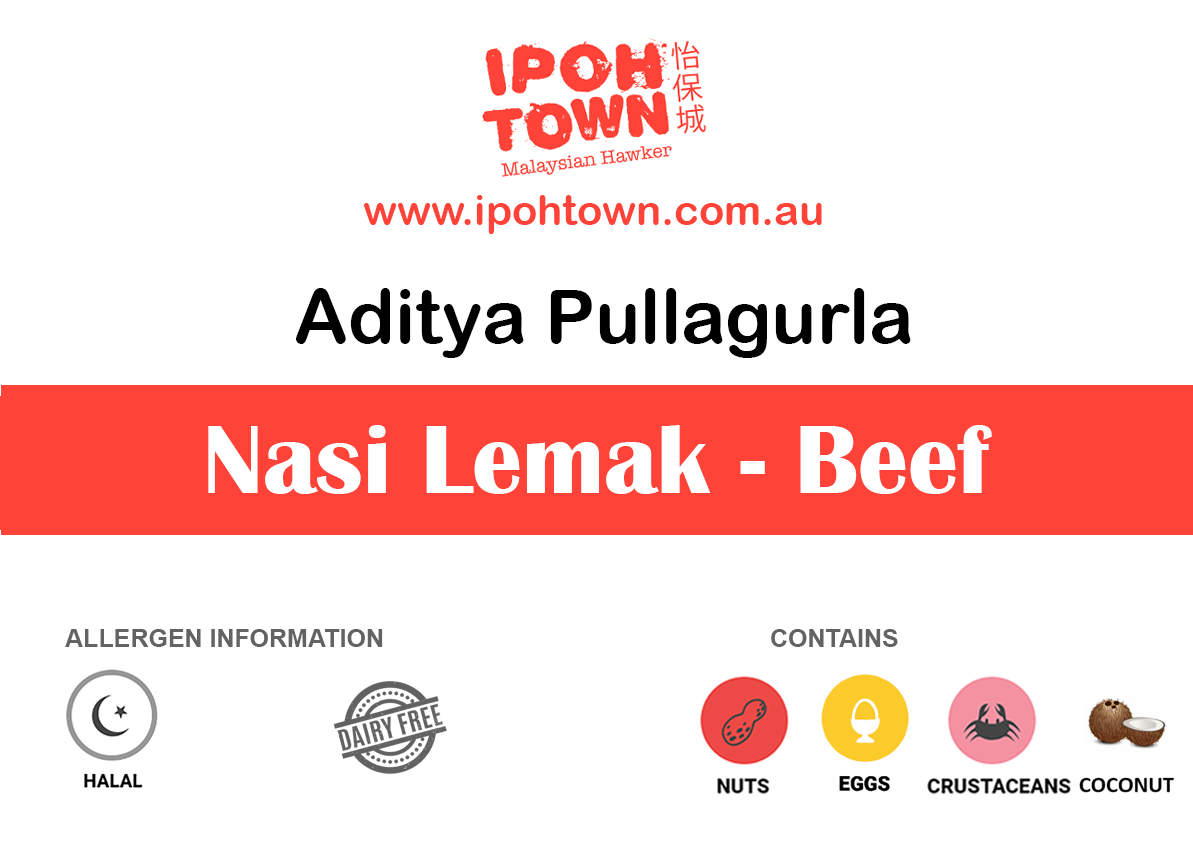
<style>
.page{position:relative;width:1193px;height:850px;background:#ffffff}
.page>*{position:absolute;margin:0}
.t1{font:41.7px "ArialRoundedMTBold";color:#ff4338}
.t2{font:75px "ArialRoundedMTBold";color:#000000}
.t3{font:100px "BritannicBold";color:#ffffff}
.t4{font:25px "Arial-BoldMT";color:#636363}
</style>
<div class="page">
<p class="t1" style="left:364px;top:195px;width:458px;height:39px">www.ipohtown.com.au</p>
<p class="t2" style="left:296px;top:288px;width:615px;height:70px">Aditya Pullagurla</p>
<p class="t3" style="left:208px;top:425px;width:784px;height:69px">Nasi Lemak - Beef</p>
<p class="t4" style="left:65px;top:629px;width:318px;height:18px">ALLERGEN INFORMATION</p>
<p class="t4" style="left:771px;top:629px;width:127px;height:18px">CONTAINS</p>
</div>
